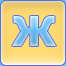
<style>
.page{position:relative;width:66px;height:66px}
.page>*{position:absolute;margin:0}
.t1{font:41px "Tahoma-Bold"}
</style>
<div class="page">
<p class="t1" style="left:12px;top:16px;width:44px;height:30px">Ж</p>
<p class="t1" style="left:12px;top:16px;width:44px;height:30px">Ж</p>
</div>
